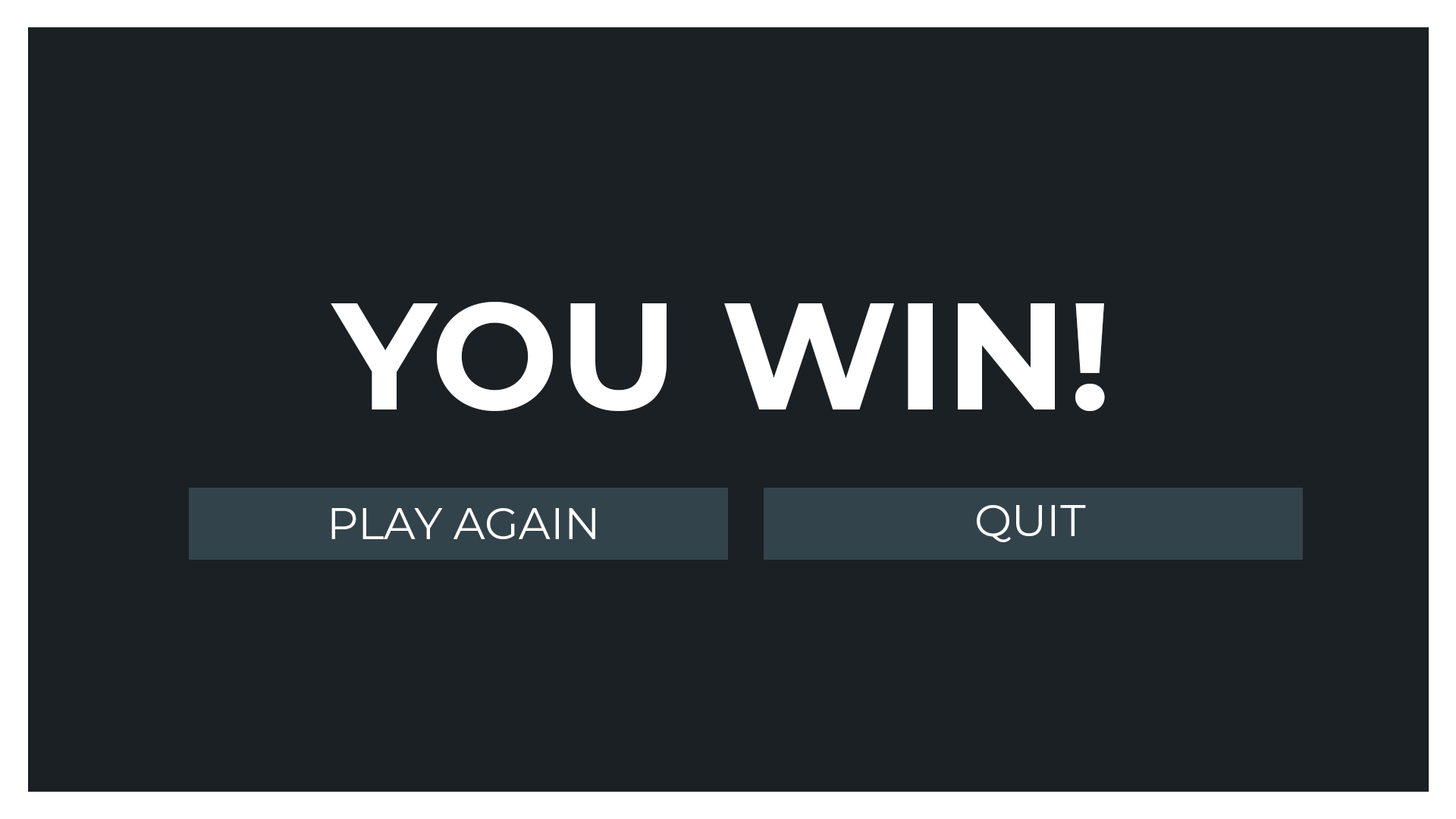
<style>
.page{position:relative;width:1456px;height:819px;background:#1b2024}
.page>*{position:absolute;margin:0}
.t1{font:151.7px "Montserrat-Bold";color:#ffffff}
.t2{font:44.2px "Montserrat-Regular";color:#ffffff}
</style>
<div class="page">
<p class="t1" style="left:331px;top:302px;width:774px;height:109px">YOU WIN!</p>
<p class="t2" style="left:331px;top:508px;width:264px;height:31px">PLAY AGAIN</p>
<p class="t2" style="left:977px;top:505px;width:109px;height:37px">QUIT</p>
</div>
